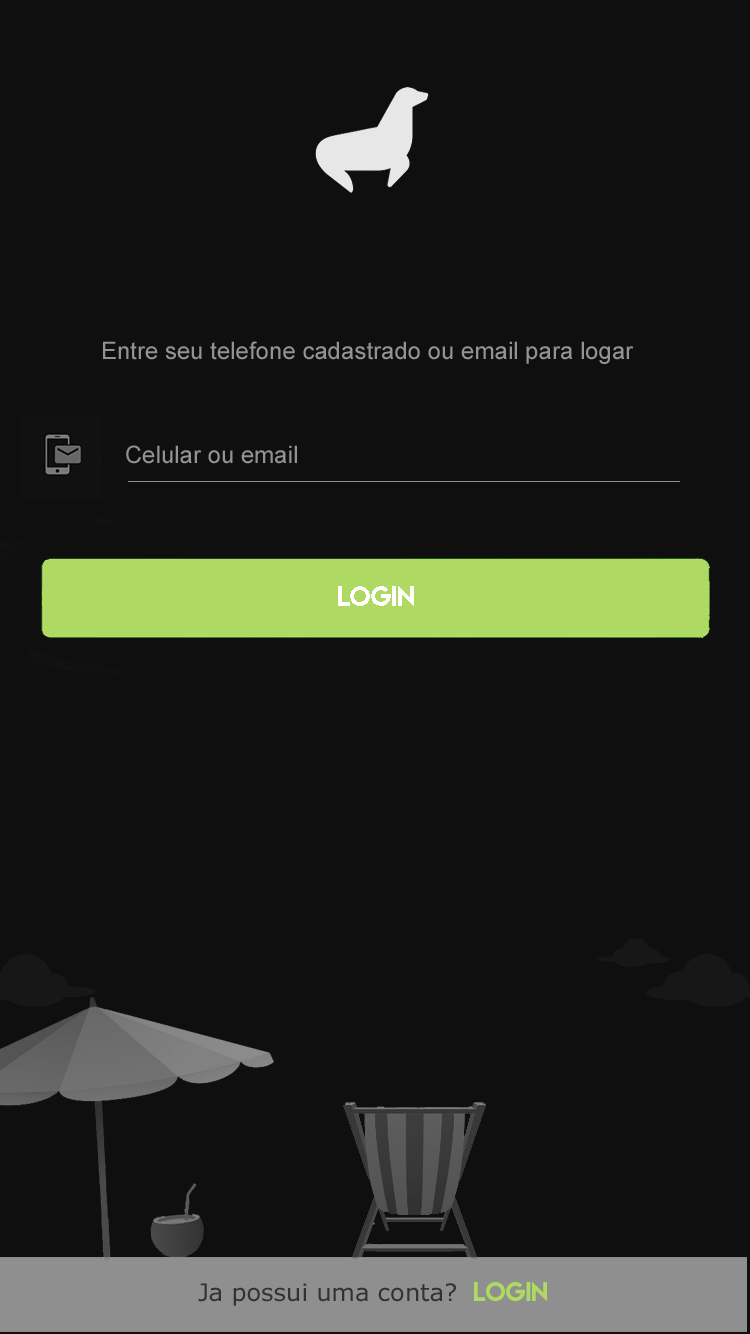
<style>
.page{position:relative;width:750px;height:1334px;background:#0f0f0f}
.page>*{position:absolute;margin:0}
.t1{font:24px "ArialMT";color:#939393}
.t2{font:25px "LemonMilk";color:#ffffff}
.t3{font:24px "Verdana";color:#313234}
.t4{font:24px "LemonMilk";color:#aed962}
</style>
<div class="page">
<p class="t1" style="left:103px;top:341px;width:531px;height:23px">Entre seu telefone cadastrado ou email para logar</p>
<p class="t1" style="left:126px;top:445px;width:171px;height:19px">Celular ou email</p>
<p class="t2" style="left:338px;top:586px;width:76px;height:20px">LOGIN</p>
<p class="t3" style="left:198px;top:1281px;width:349px;height:25px">Ja possui uma conta?  <span class="t4">LOGIN</span></p>
</div>
